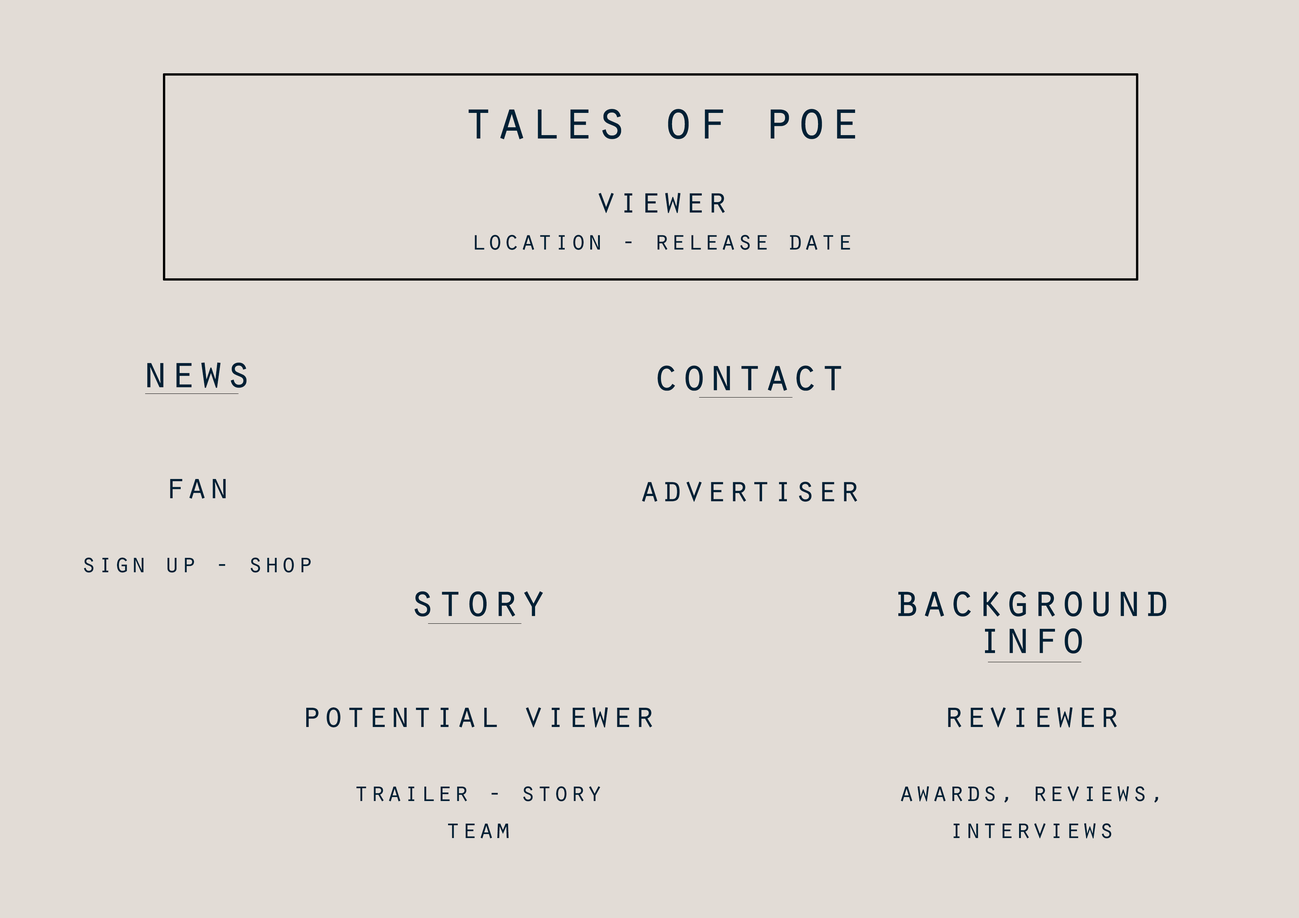
<style>
.page{position:relative;width:1299px;height:918px;background:#e2dcd6}
.page>*{position:absolute;margin:0}
.t1{font:27.8px/37px "OratorStd";color:#002035}
.t2{font:55.5px/37px "OratorStd";color:#002035}
.t3{font:37px/37px "OratorStd";color:#002035}
.t4{font:46.3px/37px "OratorStd";color:#002035}
</style>
<div class="page">
<p class="t1" style="left:468px;top:109px;width:387px;height:141px;text-align:center"><span class="t2">tales of poe<br></span><span class="t3"><br>viewer<br></span>location - release date</p>
<p class="t1" style="left:84px;top:362px;width:227px;height:211px;text-align:center"><span class="t4">news<br></span><span class="t3"><br><br>fan<br><br></span>sign up - shop</p>
<p class="t3" style="left:642px;top:365px;width:215px;height:137px;text-align:center"><span class="t4">contact<br></span><br><br>advertiser</p>
<p class="t1" style="left:306px;top:591px;width:346px;height:248px;text-align:center"><span class="t4">story<br></span><span class="t3"><br><br>potential viewer<br><br></span>trailer - story<br>team</p>
<p class="t1" style="left:898px;top:591px;width:268px;height:248px;text-align:center"><span class="t4">background<br>info<br><br></span><span class="t3">reviewer<br><br></span>awards, reviews,<br>interviews</p>
</div>
